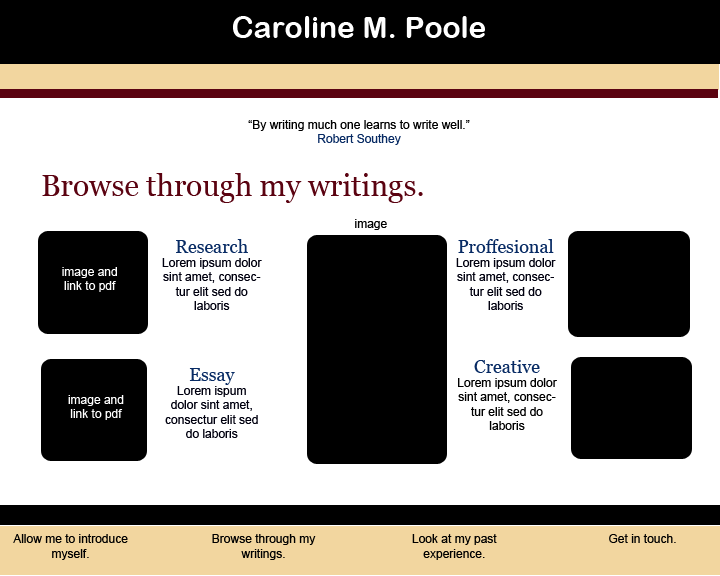
<style>
.page{position:relative;width:720px;height:576px;background:#ffffff}
.page>*{position:absolute;margin:0}
.t1{font:30px "ArialRoundedMTBold";color:#ffffff}
.t2{font:12px "ArialMT";color:#000000}
.t3{font:12px "ArialMT";color:#082b64}
.t4{font:30px "Georgia";color:#5b0311}
.t5{font:12px "ArialMT";color:#00000f}
.t6{font:18px "Georgia";color:#082b64}
.t7{font:12px "ArialMT";color:#ffffff}
</style>
<div class="page">
<p class="t1" style="left:233px;top:16px;width:252px;height:22px">Caroline M. Poole</p>
<p class="t2" style="left:248px;top:120px;width:222px;height:25px;text-align:center">“By writing much one learns to write well.”<br><span class="t3">Robert Southey</span></p>
<p class="t4" style="left:42px;top:173px;width:381px;height:30px">Browse through my writings.</p>
<p class="t2" style="left:355px;top:219px;width:32px;height:11px">image</p>
<p class="t5" style="left:162px;top:239px;width:100px;height:71px;text-align:center"><span class="t6">Research<br></span>Lorem ipsum dolor sint amet, consectur elit sed do laboris</p>
<p class="t5" style="left:456px;top:239px;width:100px;height:71px;text-align:center"><span class="t6">Proffesional<br></span>Lorem ipsum dolor sint amet, consectur elit sed do laboris</p>
<p class="t7" style="left:62px;top:267px;width:55px;height:25px;text-align:center">image and link to pdf</p>
<p class="t2" style="left:458px;top:360px;width:99px;height:70px;text-align:center"><span class="t6">Creative<br></span>Lorem ipsum dolor sint amet, consectur elit sed do laboris</p>
<p class="t5" style="left:165px;top:368px;width:93px;height:70px;text-align:center"><span class="t6">Essay<br></span>Lorem ispum dolor sint amet, consectur elit sed do laboris</p>
<p class="t7" style="left:68px;top:395px;width:56px;height:25px;text-align:center">image and link to pdf</p>
<p class="t2" style="left:13px;top:534px;width:115px;height:26px;text-align:center">Allow me to introduce myself.</p>
<p class="t2" style="left:212px;top:534px;width:104px;height:26px;text-align:center">Browse through my writings.</p>
<p class="t2" style="left:412px;top:534px;width:85px;height:26px;text-align:center">Look at my past experience.</p>
<p class="t2" style="left:609px;top:534px;width:67px;height:9px">Get in touch.</p>
</div>
